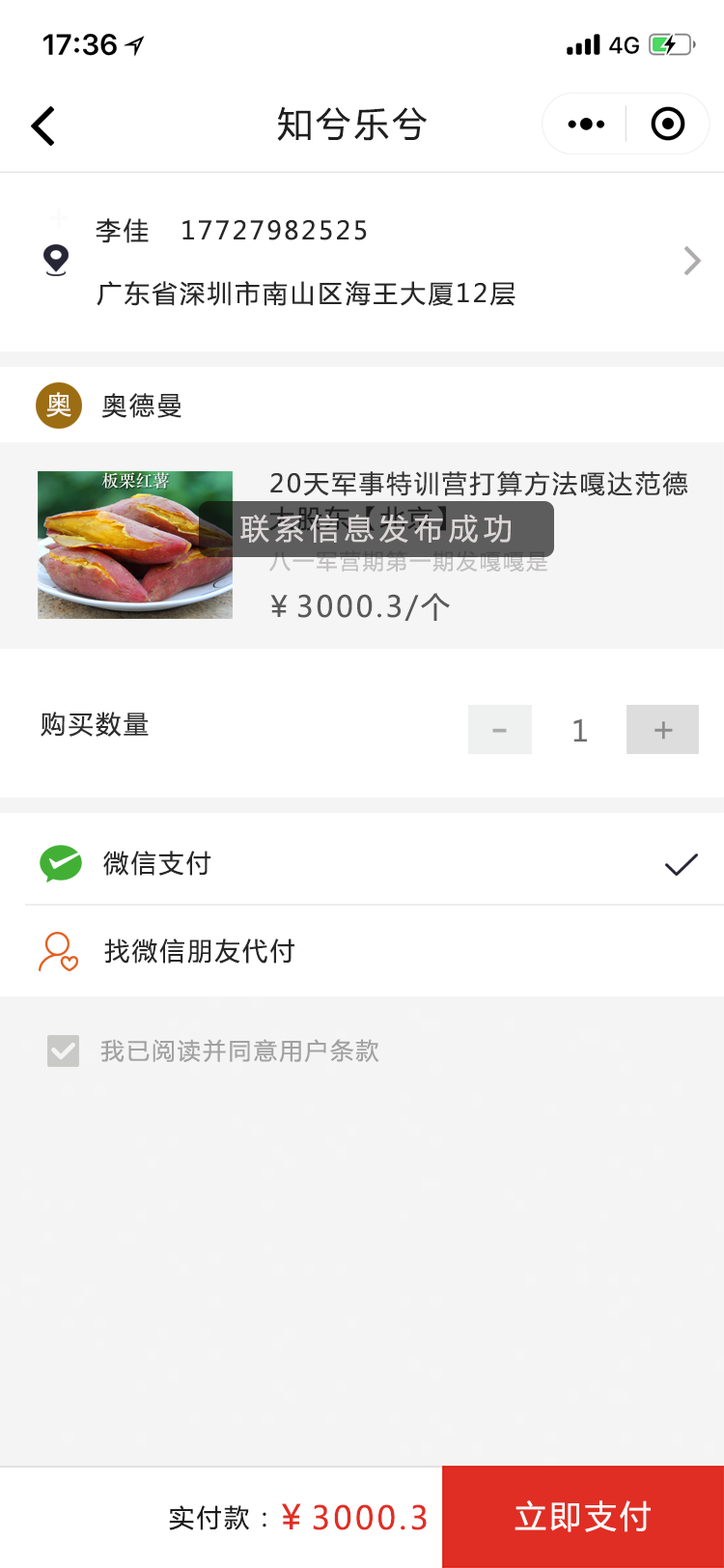
<style>
.page{position:relative;width:724px;height:1568px;background:#ffffff}
.page>*{position:absolute;margin:0}
.t1{font:34.8px "MicrosoftYaHei";letter-spacing:0.1em;color:#201f20}
.t2{font:25.1px "MicrosoftYaHei";letter-spacing:0.1em;color:#282727}
.t3{font:25.1px "MicrosoftYaHei";letter-spacing:0.1em;color:#f9f7f2}
.t4{font:25.1px/34.8px "MicrosoftYaHei";letter-spacing:0.1em;color:#373636}
.t5{font:29px "MicrosoftYaHei";letter-spacing:0.2em;color:#ddd7d7}
.t6{font:29px "MicrosoftYaHei";letter-spacing:0.1em;color:#595959}
.t7{font:25.1px "MicrosoftYaHei";letter-spacing:0.1em;color:#2f2e2e}
.t8{font:29px "MicrosoftYaHei";letter-spacing:0.1em;color:#6f6d6d}
.t9{font:34.8px "MicrosoftYaHei";letter-spacing:0.1em;color:#8e8d8d}
.t10{font:46.3px "MicrosoftYaHei";letter-spacing:0.1em;color:#acacac}
.t11{font:23.2px "MicrosoftYaHei";letter-spacing:0.1em;color:#a1a1a1}
.t12{font:25.1px "MicrosoftYaHei";letter-spacing:0.1em;color:#1e1d1d}
.t13{font:31.9px "MicrosoftYaHei";letter-spacing:0.1em;color:#e02e24}
.t14{font:33.8px "MicrosoftYaHei";letter-spacing:0.1em;color:#e02e24}
.t15{font:31.9px "MicrosoftYaHei";letter-spacing:0.1em;color:#fdfbfb}
</style>
<div class="page">
<p class="t1" style="left:277px;top:106px;width:150px;height:35px">知兮乐兮</p>
<p class="t2" style="left:96px;top:218px;width:271px;height:25px">李佳   17727982525</p>
<p class="t2" style="left:97px;top:281px;width:419px;height:25px">广东省深圳市南山区海王大厦12层</p>
<p class="t3" style="left:46px;top:392px;width:25px;height:25px">奥</p>
<p class="t2" style="left:101px;top:393px;width:81px;height:25px">奥德曼</p>
<p class="t4" style="left:269px;top:471px;width:419px;height:60px">20天军事特训营打算方法嘎达范德<br>大股东【北京】</p>
<p class="t5" style="left:240px;top:514px;width:271px;height:30px">联系信息发布成功</p>
<p class="t6" style="left:270px;top:593px;width:180px;height:28px">￥3000.3/个</p>
<p class="t7" style="left:41px;top:712px;width:108px;height:25px">购买数量</p>
<p class="t8" style="left:574px;top:718px;width:13px;height:24px">1</p>
<p class="t9" style="left:655px;top:721px;width:18px;height:19px">+</p>
<p class="t10" style="left:492px;top:728px;width:15px;height:5px">-</p>
<p class="t2" style="left:103px;top:851px;width:108px;height:25px">微信支付</p>
<p class="t2" style="left:104px;top:938px;width:190px;height:26px">找微信朋友代付</p>
<p class="t11" style="left:100px;top:1039px;width:279px;height:24px">我已阅读并同意用户条款</p>
<p class="t12" style="left:169px;top:1505px;width:97px;height:25px">实付款：</p>
<p class="t13" style="left:282px;top:1503px;width:145px;height:27px"><span class="t14">￥</span>3000.3</p>
<p class="t15" style="left:515px;top:1500px;width:136px;height:32px">立即支付</p>
</div>
